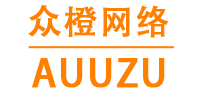
<style>
.page{position:relative;width:200px;height:100px;background:#ffffff}
.page>*{position:absolute;margin:0}
.t1{font:33.8px "AdobeHeitiStd-Regular";letter-spacing:0.04em;color:#ff8000;text-transform:uppercase;font-weight:bold}
.t2{font:37.6px "AdobeHeitiStd-Regular";letter-spacing:0.04em;color:#ff8000;text-transform:uppercase;font-weight:bold}
</style>
<div class="page">
<p class="t1" style="left:28px;top:5px;width:140px;height:33px">众橙网络</p>
<p class="t2" style="left:32px;top:58px;width:133px;height:30px">AUUZU</p>
</div>
